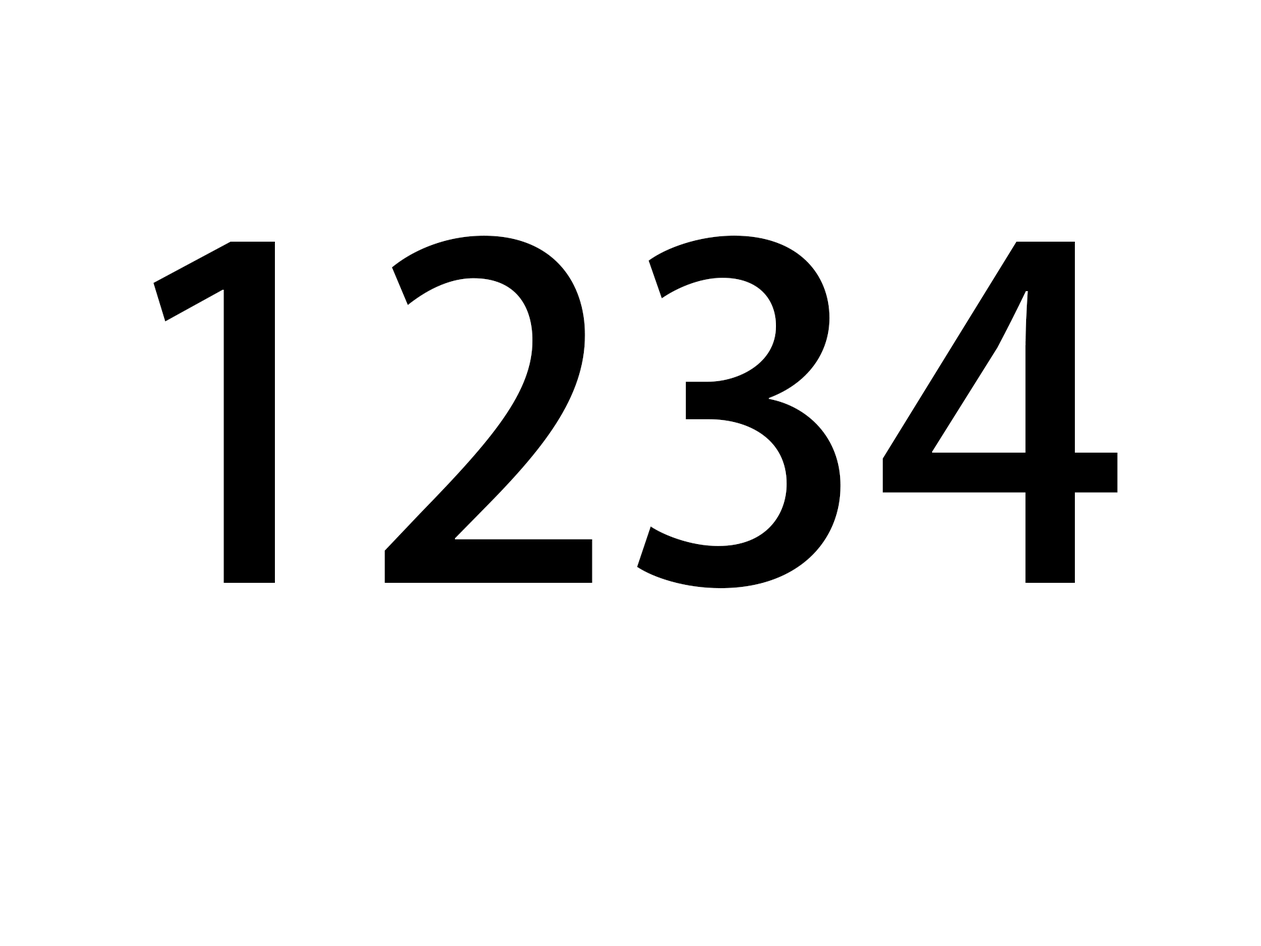
<style>
.page{position:relative;width:1261px;height:946px;background:#ffffff}
.page>*{position:absolute;margin:0}
.t1{font:453.2px "AdobeHeitiStd-Regular";color:#000000}
</style>
<div class="page">
<p class="t1" style="left:153px;top:235px;width:965px;height:354px">1234</p>
</div>
